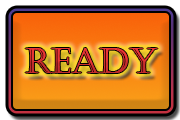
<style>
.page{position:relative;width:180px;height:120px}
.page>*{position:absolute;margin:0}
.t1{font:34.6px "Castellar"}
.t2{font:34.6px "PerpetuaTitlingMT-Bold";scale:0.6 1}
</style>
<div class="page">
<p class="t1" style="left:25px;top:48px;width:133px;height:25px"><span class="t2"><br></span>Ready</p>
</div>
